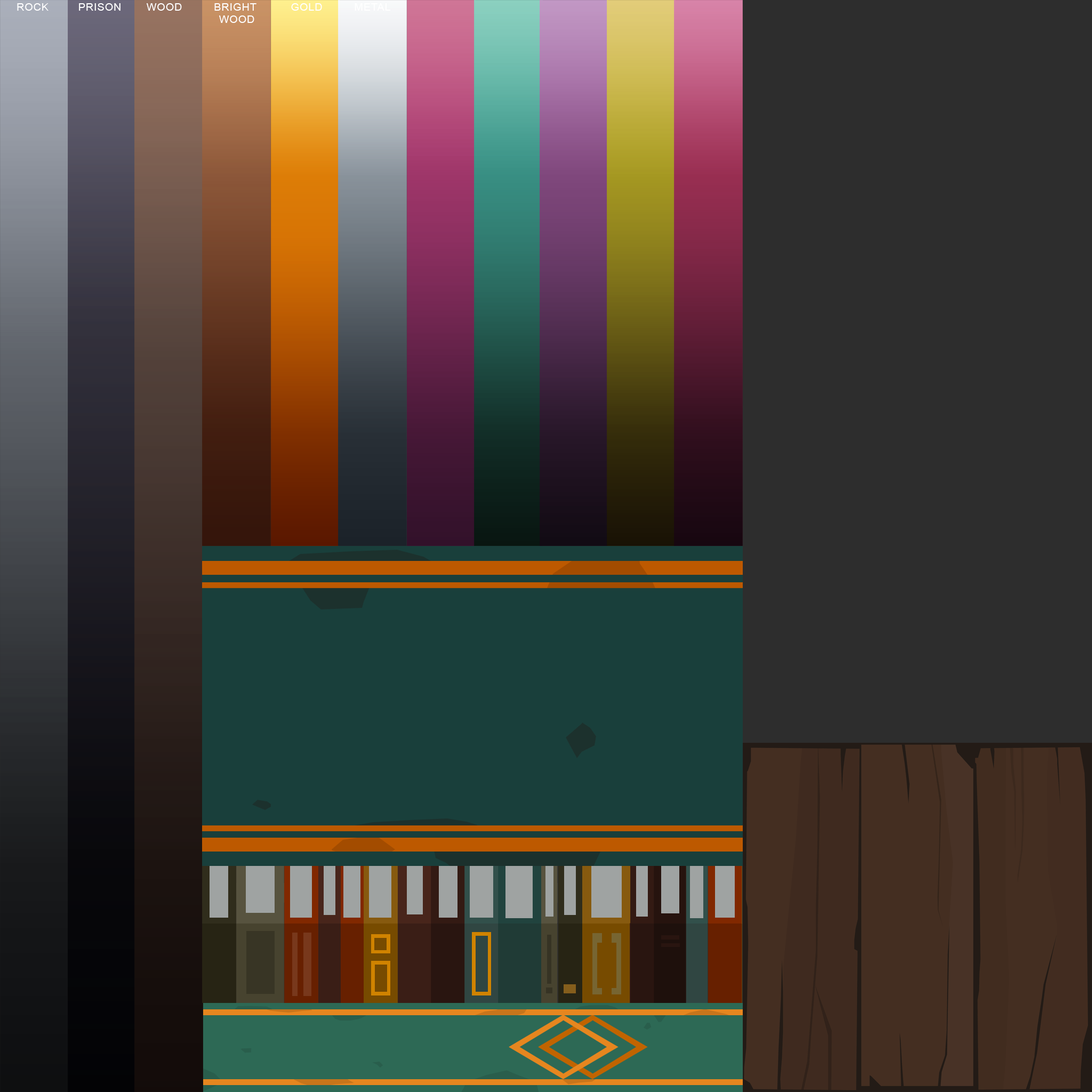
<style>
.page{position:relative;width:1092px;height:1092px;background:#2d2d2d}
.page>*{position:absolute;margin:0}
.t1{font:10.4px "ArialMT";letter-spacing:0.05em;color:#ffffff}
</style>
<div class="page">
<p class="t1" style="left:17px;top:3px;width:32px;height:8px">ROCK</p>
<p class="t1" style="left:79px;top:3px;width:42px;height:8px">PRISON</p>
<p class="t1" style="left:147px;top:3px;width:35px;height:8px">WOOD</p>
<p class="t1" style="left:214px;top:3px;width:42px;height:20px;text-align:center">BRIGHT <br>WOOD</p>
<p class="t1" style="left:291px;top:3px;width:31px;height:8px">GOLD</p>
<p class="t1" style="left:355px;top:3px;width:35px;height:8px">METAL</p>
</div>
